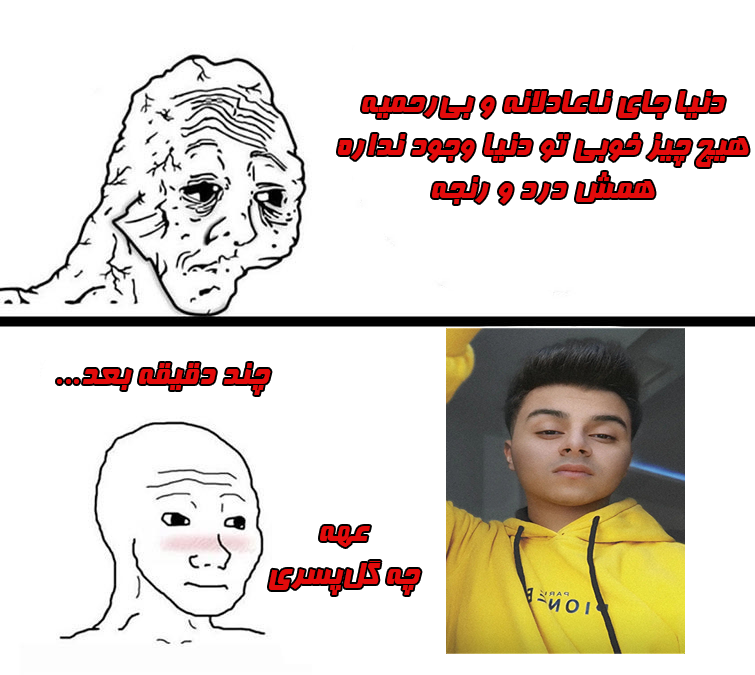
<style>
.page{position:relative;width:755px;height:675px;background:#ffffff}
.page>*{position:absolute;margin:0}
.t1{font:36px "Far.Farnaz";color:#e30b0b}
</style>
<div class="page">
<p class="t1" style="left:338px;top:91px;width:411px;height:113px;text-align:center">دنیا جای نا‌عادلانه و بی‌رحمیه<br>هیچ چیز خوبی تو دنیا وجود نداره<br>همش درد و رنجه</p>
<p class="t1" style="left:57px;top:363px;width:214px;height:32px">چند دقیقه بعد...</p>
<p class="t1" style="left:269px;top:526px;width:152px;height:69px;text-align:center">عهه<br>چه گل‌پسری</p>
</div>
